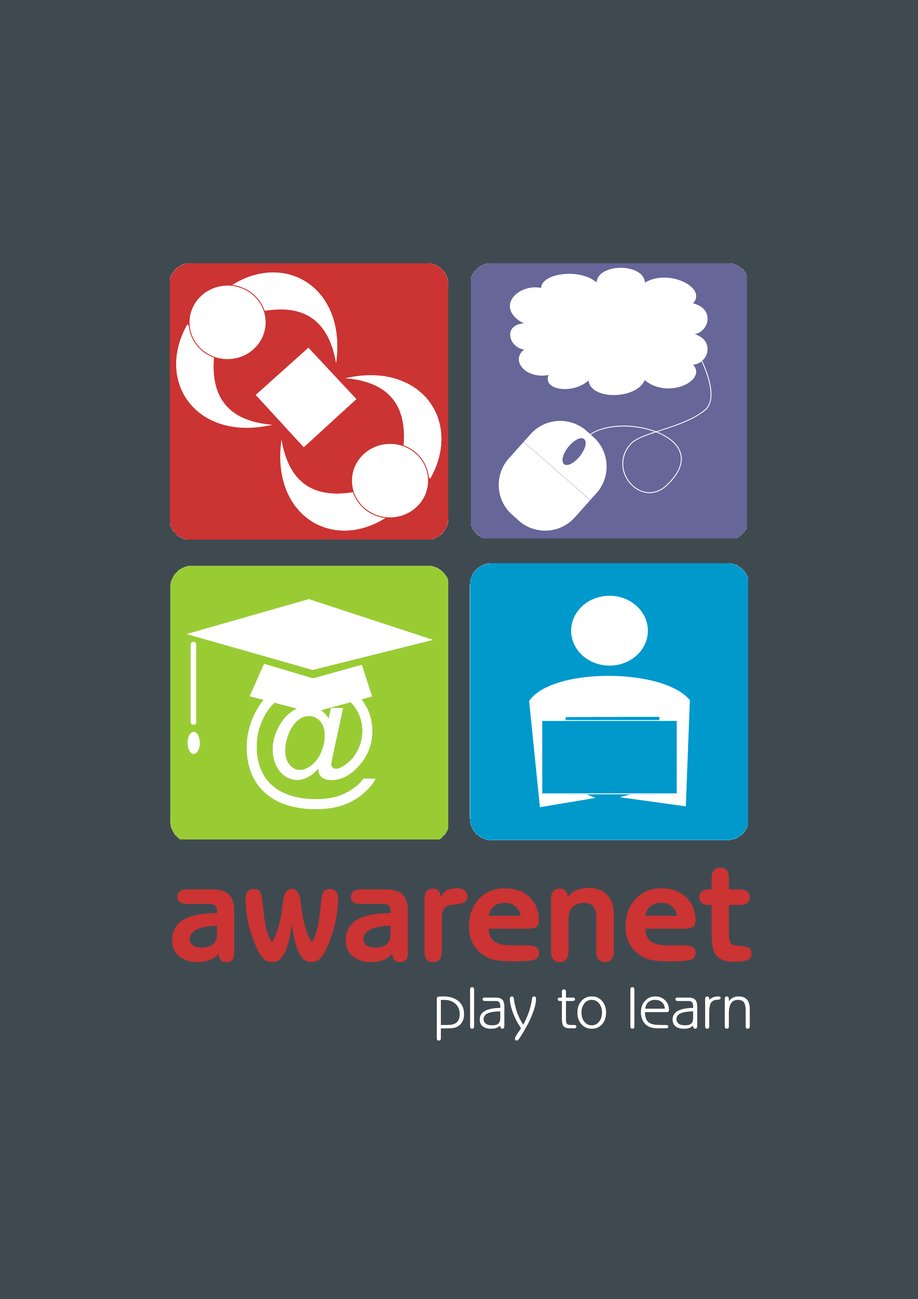
<style>
.page{position:relative;width:918px;height:1299px;background:#3f4a50}
.page>*{position:absolute;margin:0}
.t1{font:142.9px "BenguiatGothicITCbyBT-Bold";color:#cc3333}
.t2{font:61px "BenguiatGothicITCbyBT-Book";color:#ffffff}
</style>
<div class="page">
<p class="t1" style="left:172px;top:867px;width:580px;height:95px">awarenet</p>
<p class="t2" style="left:437px;top:987px;width:313px;height:53px">play to learn</p>
</div>
